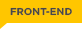
<style>
.page{position:relative;width:82px;height:29px;background:#ffc600}
.page>*{position:absolute;margin:0}
.t1{font:10px "GothamPro-Bold";color:#48494a;text-transform:uppercase}
</style>
<div class="page">
<p class="t1" style="left:10px;top:7px;width:62px;height:9px">FRONT-END</p>
</div>
